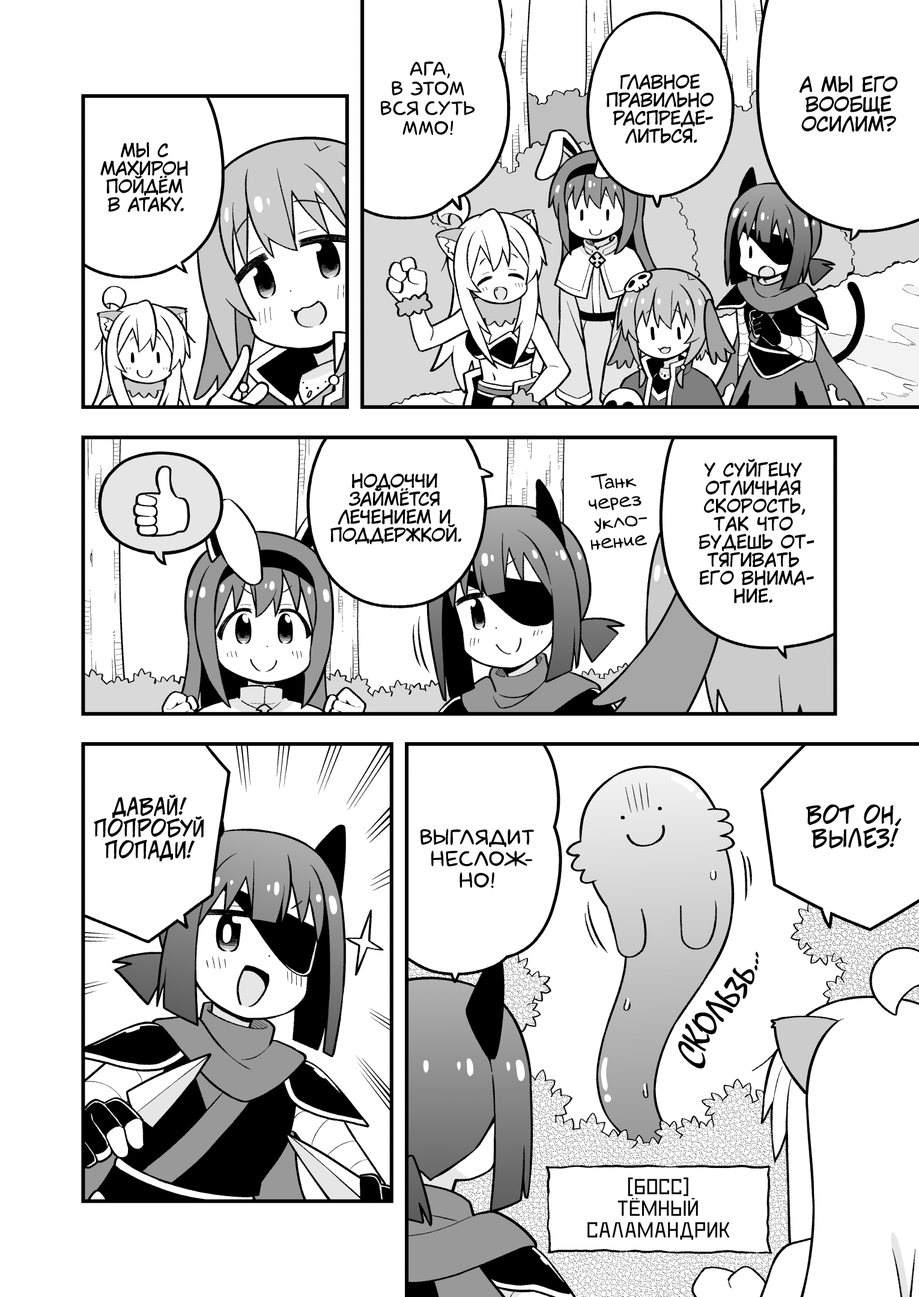
<style>
.page{position:relative;width:919px;height:1297px;background:#ffffff}
.page>*{position:absolute;margin:0}
.t1{font:19.8px "laCartoonerie";color:#000000;text-transform:uppercase}
.t2{font:18px "KuraiVoice2";color:#000000;text-transform:uppercase}
.t3{font:19.8px "KuraiVoice2";color:#000000;text-transform:uppercase}
.t4{font:19.8px "v_Augie";color:#000000}
.t5{font:21.6px "v_CCJeffCampbell";color:#000000;text-transform:uppercase}
.t6{font:23.4px "v_CCJeffCampbell";color:#000000;text-transform:uppercase}
.t7{font:21.6px "laCartoonerie";color:#000000;text-transform:uppercase}
.t8{font:36px "MistralC";color:#000000;text-transform:uppercase}
.t9{font:21.6px "DeadMetroC";color:#000000;text-transform:uppercase}
</style>
<div class="page">
<p class="t1" style="left:381px;top:61px;width:94px;height:74px;text-align:center">Ага,<br>в этом<br>вся суть<br>ММО!</p>
<p class="t2" style="left:606px;top:74px;width:108px;height:70px;text-align:center">Главное<br>правильно<br>распреде-<br>литься.</p>
<p class="t3" style="left:800px;top:75px;width:98px;height:58px;text-align:center">А мы его<br>вообще<br>осилим?</p>
<p class="t2" style="left:100px;top:142px;width:88px;height:70px;text-align:center">Мы с<br>Махирон<br>пойдём<br>в атаку.</p>
<p class="t2" style="left:699px;top:459px;width:116px;height:145px;text-align:center">У Суйгецу<br>отличная<br>скорость,<br>так что<br>будешь от-<br>тягивать<br>его внима-<br>ние.</p>
<p class="t2" style="left:330px;top:473px;width:131px;height:72px;text-align:center">Нодоччи<br>займётся<br>лечением и<br>поддержкой.</p>
<p class="t4" style="left:589px;top:473px;width:58px;height:77px;text-align:center;rotate:-5deg">Танк<br>через<br>укло-<br>нение</p>
<p class="t5" style="left:94px;top:794px;width:110px;height:68px;text-align:center">Давай!<br>Попробуй<br>попади!</p>
<p class="t6" style="left:806px;top:804px;width:96px;height:45px;text-align:center">Вот он,<br>вылез!</p>
<p class="t7" style="left:420px;top:829px;width:114px;height:59px;text-align:center">Выглядит<br>неслож-<br>но!</p>
<p class="t8" style="left:678px;top:952px;width:81px;height:117px;rotate:-64deg">скользь...</p>
<p class="t9" style="left:587px;top:1178px;width:143px;height:62px;text-align:center">[Босс]<br>Тёмный<br>саламандрик</p>
</div>
